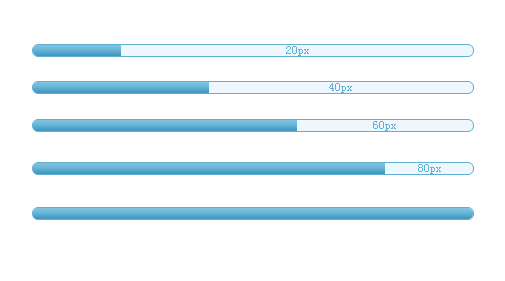
<style>
.page{position:relative;width:505px;height:281px;background:#ffffff}
.page>*{position:absolute;margin:0}
.t1{font:12px "SimSun";color:#5fb0d3}
</style>
<div class="page">
<p class="t1" style="left:286px;top:46px;width:23px;height:10px">20px</p>
<p class="t1" style="left:329px;top:83px;width:23px;height:10px">40px</p>
<p class="t1" style="left:373px;top:121px;width:23px;height:10px">60px</p>
<p class="t1" style="left:418px;top:164px;width:23px;height:10px">80px</p>
</div>
